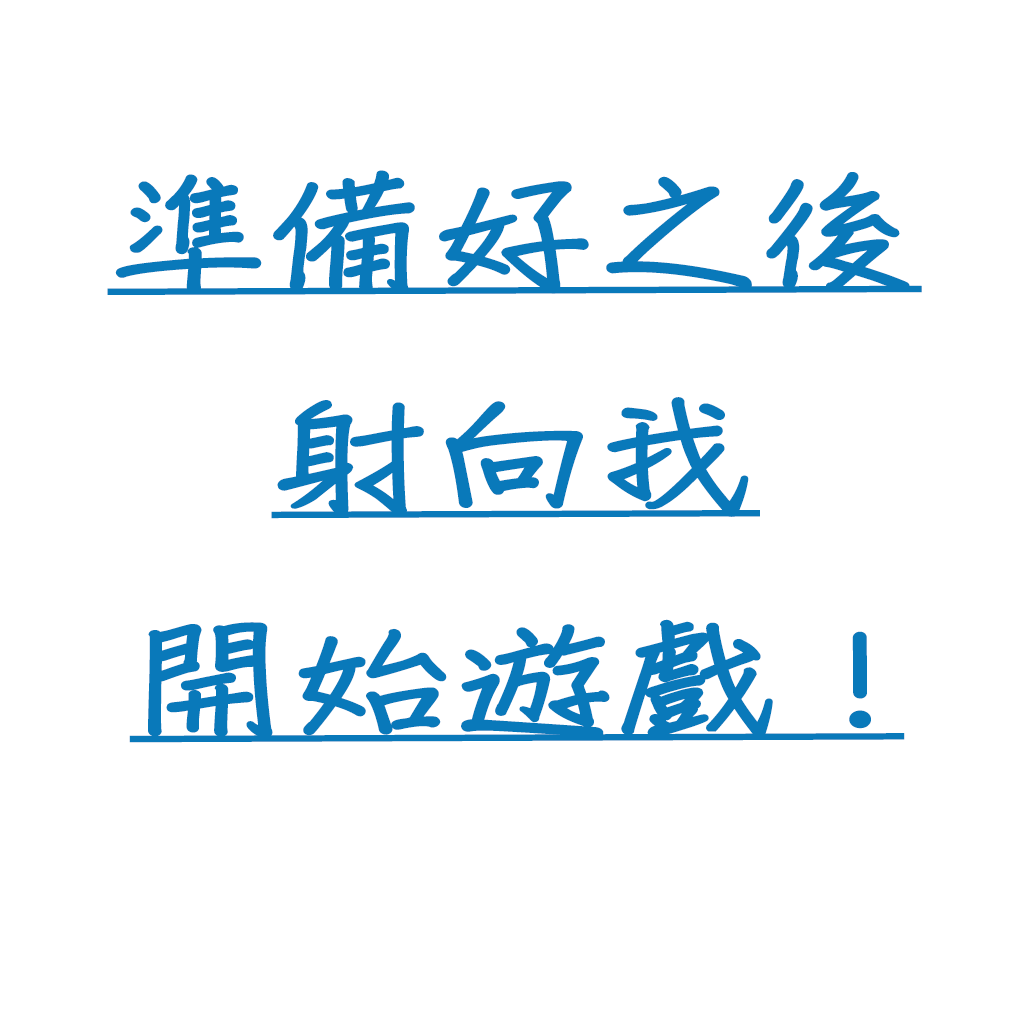
<style>
.page{position:relative;width:1024px;height:1024px;background:#ffffff}
.page>*{position:absolute;margin:0}
.t1{font:127.8px "DFChu-W4-WIN-BF";color:#0979ba;font-weight:bold;text-decoration:underline;scale:1.24 1}
</style>
<div class="page">
<p class="t1" style="left:107px;top:170px;width:815px;height:573px;text-align:center">準備好之後<br>射向我<br>開始遊戲!</p>
</div>
